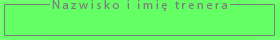
<style>
.page{position:relative;width:280px;height:40px;background:#64ff64}
.page>*{position:absolute;margin:0}
.t1{font:12.5px "MyriadPro-Regular";letter-spacing:0.2em;color:#7c7c7c}
</style>
<div class="page">
<p class="t1" style="left:52px;top:0px;width:175px;height:11px">Nazwisko i imię trenera</p>
</div>
